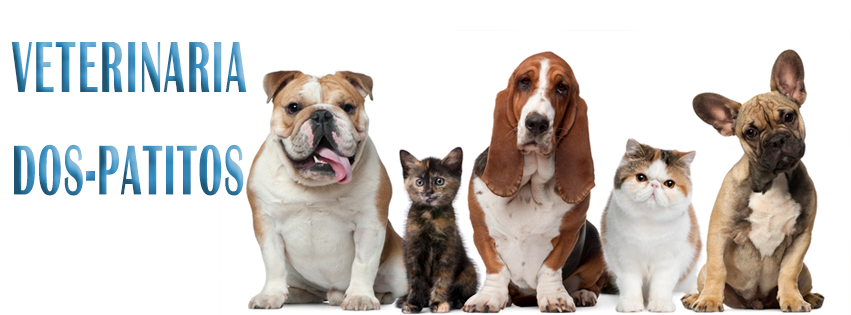
<style>
.page{position:relative;width:851px;height:315px;background:#ffffff}
.page>*{position:absolute;margin:0}
.t1{font:75.4px "BritannicBold";letter-spacing:0.06em;scale:0.49 1}
.t2{font:73px "BritannicBold";letter-spacing:0.06em;scale:0.5 1}
</style>
<div class="page">
<p class="t1" style="left:11px;top:42px;width:236px;height:50px">VETERINARIA</p>
<p class="t2" style="left:14px;top:144px;width:230px;height:52px">DOS-PATITOS</p>
</div>
